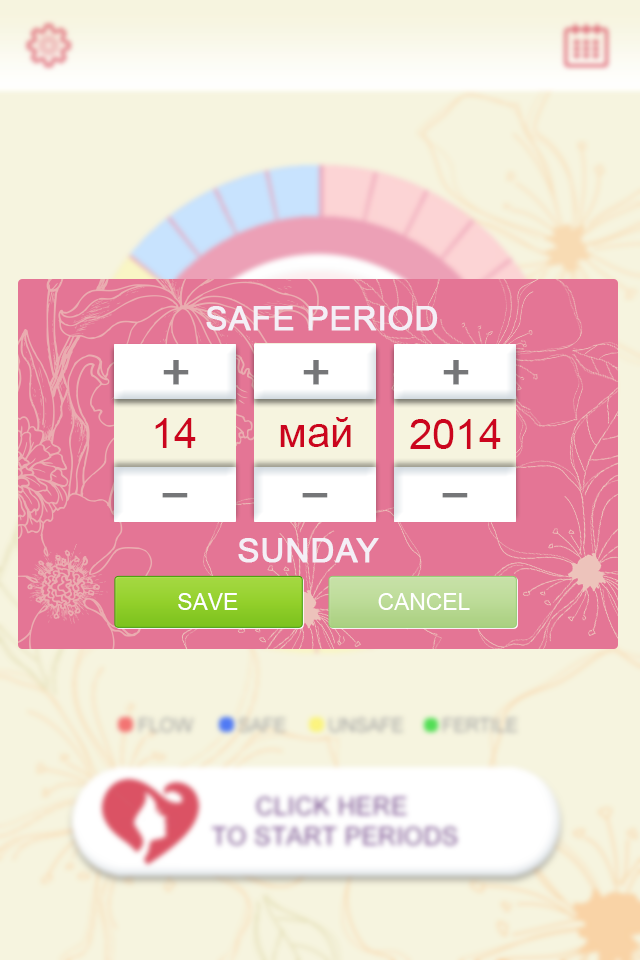
<style>
.page{position:relative;width:640px;height:960px;background:#f6f4df}
.page>*{position:absolute;margin:0}
.t1{font:33.3px "ArialMT";color:#f4eff6;text-transform:uppercase;font-weight:bold}
.t2{font:48.6px "ArialMT";color:#757678;text-transform:uppercase;font-weight:bold}
.t3{font:41.7px "ArialMT";color:#cb051e}
.t4{font:49px "ArialMT";color:#757678;text-transform:uppercase;font-weight:bold;scale:1.7 1}
.t5{font:22.8px "ArialMT";color:#ffffff;text-transform:uppercase}
</style>
<div class="page">
<p class="t1" style="left:206px;top:306px;width:232px;height:25px">Safe period</p>
<p class="t2" style="left:163px;top:360px;width:26px;height:25px">+</p>
<p class="t2" style="left:303px;top:360px;width:26px;height:25px">+</p>
<p class="t2" style="left:443px;top:360px;width:26px;height:25px">+</p>
<p class="t3" style="left:155px;top:418px;width:41px;height:30px">14</p>
<p class="t3" style="left:280px;top:417px;width:71px;height:30px">май</p>
<p class="t3" style="left:410px;top:419px;width:91px;height:30px">2014</p>
<p class="t4" style="left:162px;top:493px;width:26px;height:5px">-</p>
<p class="t4" style="left:302px;top:493px;width:26px;height:5px">-</p>
<p class="t4" style="left:442px;top:493px;width:26px;height:5px">-</p>
<p class="t1" style="left:238px;top:538px;width:141px;height:25px">sunday</p>
<p class="t5" style="left:178px;top:593px;width:60px;height:17px">Save</p>
<p class="t5" style="left:378px;top:593px;width:92px;height:17px">Cancel</p>
</div>
